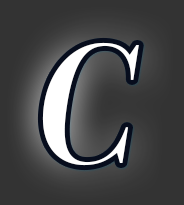
<style>
.page{position:relative;width:184px;height:205px;background:#333333}
.page>*{position:absolute;margin:0}
.t1{font:160px "KochoStd-Heavy";letter-spacing:-0.08em;color:#ffffff;font-style:italic;scale:0.9 1}
</style>
<div class="page">
<p class="t1" style="left:42px;top:42px;width:97px;height:124px">C</p>
</div>
